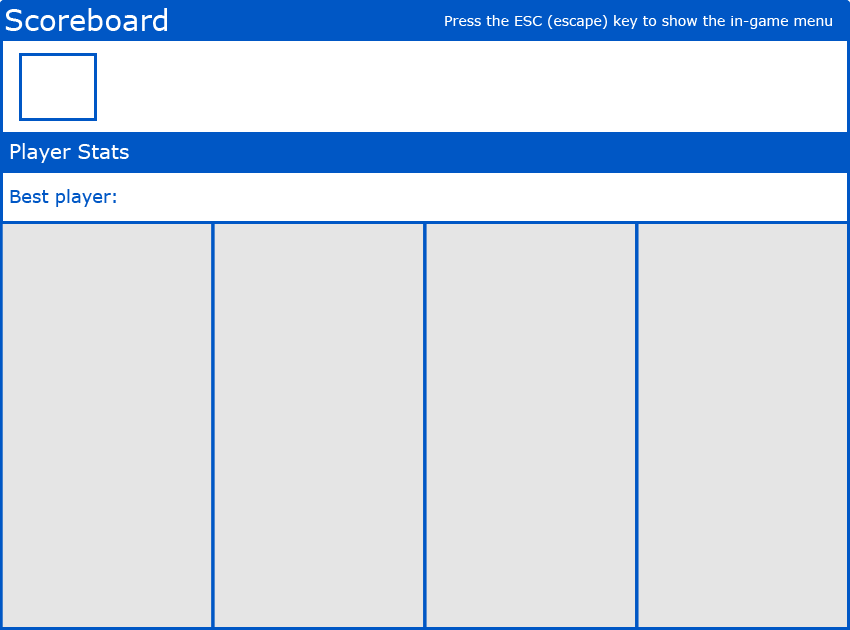
<style>
.page{position:relative;width:850px;height:630px;background:#e5e5e5}
.page>*{position:absolute;margin:0}
.t1{font:29px "Verdana";color:#ffffff}
.t2{font:14px "Verdana";color:#ffffff}
.t3{font:20px "Verdana";color:#ffffff}
.t4{font:18px "Verdana";color:#0057c5}
</style>
<div class="page">
<p class="t1" style="left:5px;top:8px;width:162px;height:23px">Scoreboard</p>
<p class="t2" style="left:445px;top:15px;width:387px;height:14px">Press the ESC (escape) key to show the in-game menu</p>
<p class="t3" style="left:10px;top:143px;width:119px;height:20px">Player Stats</p>
<p class="t4" style="left:10px;top:189px;width:106px;height:18px">Best player:</p>
</div>
